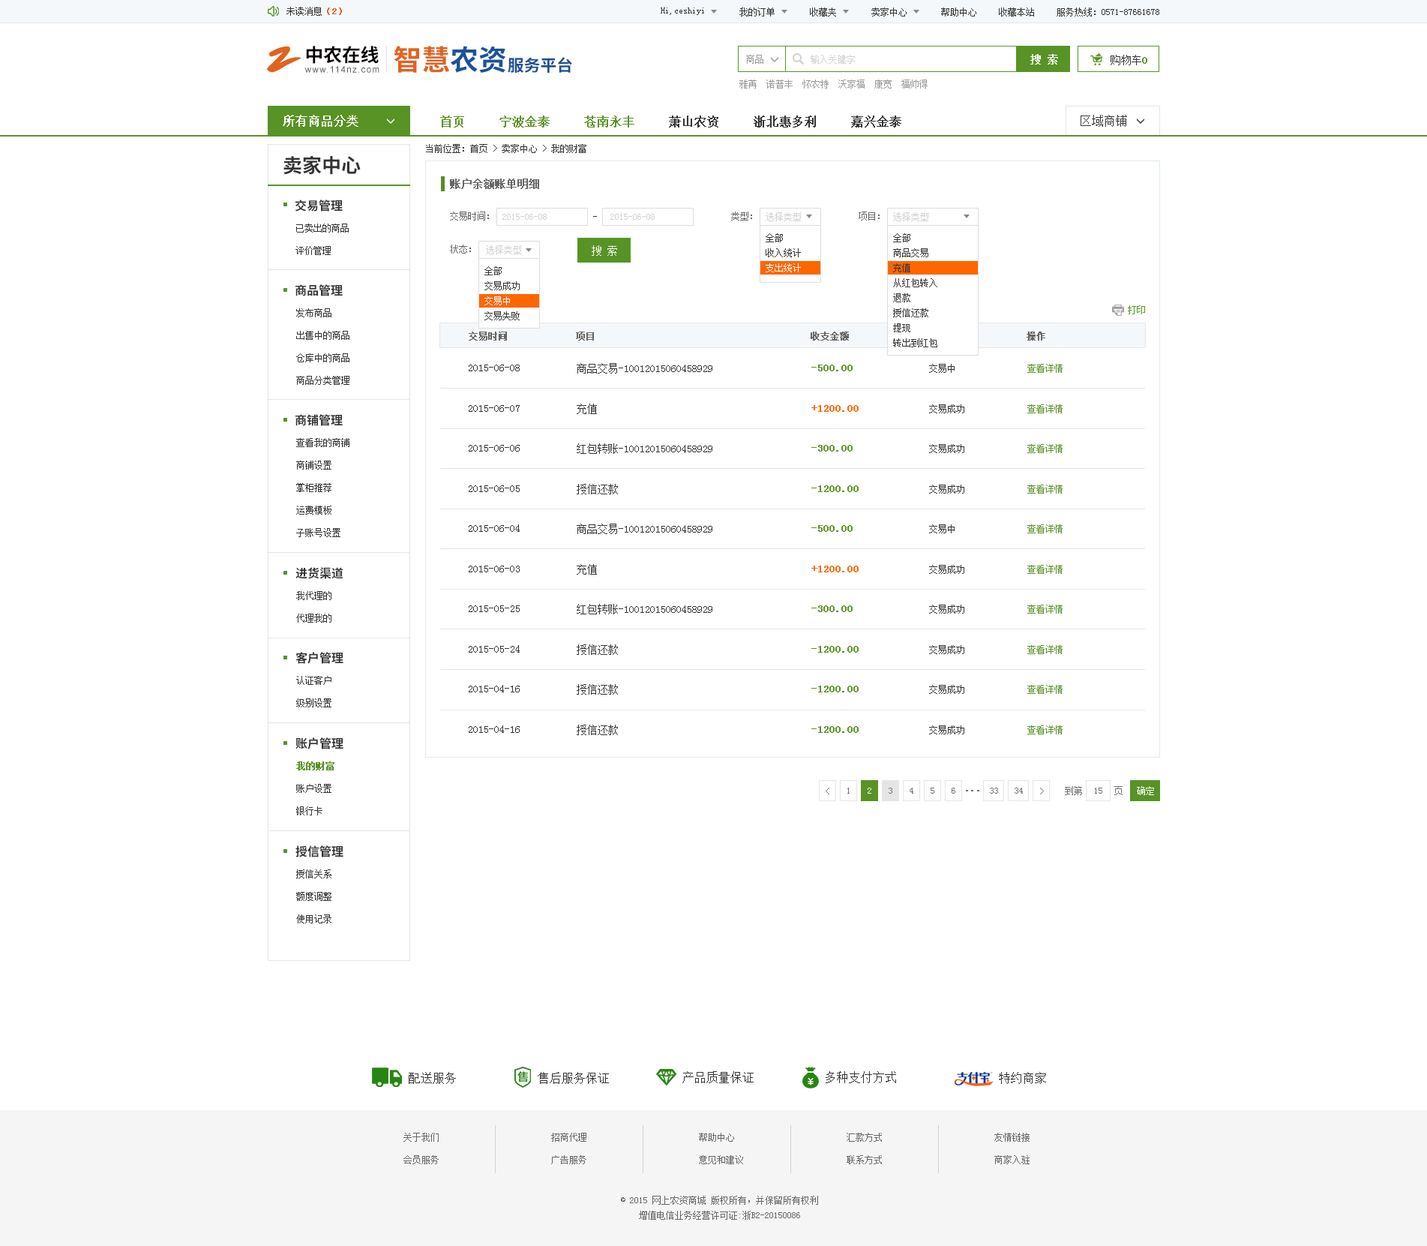
<style>
.page{position:relative;width:1427px;height:1246px;background:#ffffff}
.page>*{position:absolute;margin:0}
.t1{font:9px "SimSun";color:#333333}
.t2{font:9px "SimSun";color:#e0631f;font-weight:bold}
.t3{font:38px "SmudgerLetPlain";color:#e0631f}
.t4{font:18.6px "SourceHanSansCN-Bold";color:#060001}
.t5{font:28.4px "SourceHanSansCN-Bold";color:#e0631f}
.t6{font:28.4px "SourceHanSansCN-Bold";color:#1a529c}
.t7{font:10.5px "SimSun";color:#ffffff;font-weight:bold}
.t8{font:16.3px "SourceHanSansCN-Bold";color:#194f93}
.t9{font:9px "SimSun";color:#999999}
.t10{font:9px "SimSun";color:#d1d1d1}
.t11{font:10.5px "SimSun";color:#333333}
.t12{font:10.5px "SimSun";color:#589325;font-weight:bold}
.t13{font:8.9px "ArialMT";letter-spacing:0.1em;color:#585859}
.t14{font:12px "SimSun";color:#ffffff;font-weight:bold}
.t15{font:12px "SimSun";color:#333333;font-weight:bold}
.t16{font:12px "SimSun";color:#589325;font-weight:bold}
.t17{font:12px "SimSun";color:#333333}
.t18{font:19.5px "SourceHanSansCN-Bold";color:#333333}
.t19{font:10.5px "SimSun";color:#666666;font-weight:bold}
.t20{font:12px "SourceHanSansCN-Bold";color:#333333}
.t21{font:9px "SimSun";color:#666666}
.t22{font:9px/22.5px "SimSun";color:#333333}
.t23{font:9px/15px "SimSun";color:#333333}
.t24{font:9px/15px "SimSun";color:#ffffff}
.t25{font:10.5px "SimSun";color:#ffffff}
.t26{font:9px "SimSun";color:#589325}
.t27{font:9px "SimSun";color:#666666;font-weight:bold}
.t28{font:10.5px "SimSun";color:#ff6600;font-weight:bold}
.t29{font:9px/22.5px "SimSun";color:#589325;font-weight:bold}
.t30{font:9px "SimSun";color:#6e6e6e}
.t31{font:9px "SimSun";color:#ffffff}
.t32{font:10.5px "SimSun";letter-spacing:-0.3em;color:#6e6e6e;font-weight:bold}
.t33{font:9px/22.5px "SimSun";color:#666666}
.t34{font:9px/15px "SimSun";color:#666666}
</style>
<div class="page">
<p class="t1" style="left:286px;top:7px;width:56px;height:9px">未读消息<span class="t2">（2）</span></p>
<p class="t1" style="left:661px;top:8px;width:43px;height:7px">Hi,ceshiyi</p>
<p class="t1" style="left:740px;top:8px;width:35px;height:8px">我的订单</p>
<p class="t1" style="left:810px;top:8px;width:26px;height:8px">收藏夹</p>
<p class="t1" style="left:872px;top:8px;width:35px;height:8px">卖家中心</p>
<p class="t1" style="left:941px;top:8px;width:35px;height:8px">帮助中心</p>
<p class="t1" style="left:999px;top:8px;width:35px;height:8px">收藏本站</p>
<p class="t1" style="left:1057px;top:8px;width:103px;height:8px">服务热线：0571-87661678</p>
<p class="t3" style="left:267px;top:46px;width:35px;height:27px">Z</p>
<p class="t4" style="left:306px;top:46px;width:73px;height:18px">中农在线</p>
<p class="t5" style="left:394px;top:46px;width:112px;height:27px">智慧<span class="t6">农资</span></p>
<p class="t7" style="left:1030px;top:54px;width:28px;height:10px">搜 索</p>
<p class="t8" style="left:508px;top:57px;width:64px;height:16px">服务平台</p>
<p class="t9" style="left:746px;top:55px;width:18px;height:9px">商品</p>
<p class="t10" style="left:811px;top:55px;width:44px;height:9px">输入关键字</p>
<p class="t11" style="left:1111px;top:55px;width:37px;height:10px">购物车<span class="t12">0</span></p>
<p class="t13" style="left:304px;top:66px;width:76px;height:7px">www.114nz.com</p>
<p class="t9" style="left:740px;top:80px;width:188px;height:8px">雅苒  诺普丰  怀农特  沃家福  康宽  福帅得</p>
<p class="t14" style="left:283px;top:115px;width:75px;height:12px">所有商品分类</p>
<p class="t15" style="left:440px;top:116px;width:462px;height:12px"><span class="t16">首页     宁波金泰     苍南永丰    </span> 萧山农资     浙北惠多利     嘉兴金泰</p>
<p class="t17" style="left:1081px;top:115px;width:46px;height:12px">区域商铺</p>
<p class="t1" style="left:426px;top:144px;width:160px;height:9px">当前位置：首页 &gt; 卖家中心 &gt; 我的财富</p>
<p class="t18" style="left:284px;top:155px;width:77px;height:20px">卖家中心</p>
<p class="t19" style="left:450px;top:178px;width:89px;height:11px">账户余额账单明细</p>
<p class="t20" style="left:295px;top:200px;width:48px;height:12px">交易管理</p>
<p class="t21" style="left:450px;top:212px;width:39px;height:8px">交易时间：</p>
<p class="t10" style="left:502px;top:214px;width:45px;height:6px">2015-06-08</p>
<p class="t10" style="left:610px;top:214px;width:45px;height:6px">2015-06-08</p>
<p class="t21" style="left:731px;top:212px;width:21px;height:8px">类型：</p>
<p class="t10" style="left:766px;top:212px;width:35px;height:9px">选择类型</p>
<p class="t21" style="left:859px;top:212px;width:21px;height:8px">项目：</p>
<p class="t10" style="left:893px;top:212px;width:35px;height:9px">选择类型</p>
<p class="t22" style="left:296px;top:224px;width:53px;height:31px">已卖出的商品<br>评价管理</p>
<p class="t23" style="left:766px;top:233px;width:35px;height:39px">全部<br>收入统计<br><span class="t24">支出统计</span></p>
<p class="t23" style="left:893px;top:233px;width:45px;height:114px">全部<br>商品交易<br>充值<br>从红包转入<br>退款<br>授信还款<br>提现<br>转出到红包</p>
<p class="t21" style="left:450px;top:244px;width:21px;height:10px">状态：</p>
<p class="t10" style="left:486px;top:245px;width:35px;height:9px">选择类型</p>
<p class="t25" style="left:592px;top:245px;width:25px;height:11px">搜 索</p>
<p class="t23" style="left:484px;top:266px;width:36px;height:54px">全部<br>交易成功<br><span class="t24">交易中<br></span>交易失败</p>
<p class="t20" style="left:296px;top:284px;width:47px;height:12px">商品管理</p>
<p class="t26" style="left:1128px;top:305px;width:17px;height:9px">打印</p>
<p class="t22" style="left:296px;top:308px;width:54px;height:77px">发布商品<br>出售中的商品<br>仓库中的商品<br>商品分类管理</p>
<p class="t27" style="left:469px;top:332px;width:577px;height:8px">交易时间             项目                                         收支金额               状态               操作</p>
<p class="t11" style="left:469px;top:364px;width:51px;height:7px">2015-06-08</p>
<p class="t11" style="left:577px;top:363px;width:135px;height:11px">商品交易-10012015060458929</p>
<p class="t12" style="left:812px;top:364px;width:41px;height:7px">-500.00</p>
<p class="t1" style="left:929px;top:364px;width:26px;height:9px">交易中</p>
<p class="t26" style="left:1028px;top:364px;width:35px;height:9px">查看详情</p>
<p class="t20" style="left:296px;top:414px;width:47px;height:12px">商铺管理</p>
<p class="t11" style="left:469px;top:405px;width:51px;height:7px">2015-06-07</p>
<p class="t11" style="left:577px;top:404px;width:20px;height:10px">充值</p>
<p class="t28" style="left:812px;top:405px;width:47px;height:7px">+1200.00</p>
<p class="t1" style="left:929px;top:404px;width:35px;height:9px">交易成功</p>
<p class="t26" style="left:1028px;top:404px;width:35px;height:9px">查看详情</p>
<p class="t22" style="left:296px;top:438px;width:54px;height:99px">查看我的商铺<br>商铺设置<br>掌柜推荐<br>运费模板<br>子账号设置</p>
<p class="t11" style="left:469px;top:445px;width:51px;height:7px">2015-06-06</p>
<p class="t11" style="left:577px;top:443px;width:135px;height:11px">红包转账-10012015060458929</p>
<p class="t12" style="left:812px;top:445px;width:41px;height:7px">-300.00</p>
<p class="t1" style="left:929px;top:444px;width:35px;height:9px">交易成功</p>
<p class="t26" style="left:1028px;top:444px;width:35px;height:9px">查看详情</p>
<p class="t11" style="left:469px;top:485px;width:51px;height:7px">2015-06-05</p>
<p class="t11" style="left:577px;top:484px;width:41px;height:10px">授信还款</p>
<p class="t12" style="left:812px;top:485px;width:47px;height:7px">-1200.00</p>
<p class="t1" style="left:929px;top:484px;width:35px;height:10px">交易成功</p>
<p class="t26" style="left:1028px;top:484px;width:35px;height:10px">查看详情</p>
<p class="t11" style="left:469px;top:524px;width:51px;height:8px">2015-06-04</p>
<p class="t11" style="left:577px;top:524px;width:135px;height:10px">商品交易-10012015060458929</p>
<p class="t12" style="left:812px;top:525px;width:41px;height:7px">-500.00</p>
<p class="t1" style="left:929px;top:524px;width:26px;height:9px">交易中</p>
<p class="t26" style="left:1028px;top:524px;width:35px;height:9px">查看详情</p>
<p class="t20" style="left:296px;top:567px;width:48px;height:12px">进货渠道</p>
<p class="t11" style="left:469px;top:566px;width:51px;height:6px">2015-06-03</p>
<p class="t11" style="left:577px;top:564px;width:20px;height:10px">充值</p>
<p class="t28" style="left:812px;top:566px;width:47px;height:6px">+1200.00</p>
<p class="t1" style="left:929px;top:565px;width:35px;height:9px">交易成功</p>
<p class="t26" style="left:1028px;top:565px;width:35px;height:9px">查看详情</p>
<p class="t22" style="left:296px;top:591px;width:36px;height:31px">我代理的<br>代理我的</p>
<p class="t11" style="left:469px;top:605px;width:51px;height:7px">2015-05-25</p>
<p class="t11" style="left:577px;top:604px;width:135px;height:10px">红包转账-10012015060458929</p>
<p class="t12" style="left:812px;top:605px;width:41px;height:7px">-300.00</p>
<p class="t1" style="left:929px;top:604px;width:35px;height:10px">交易成功</p>
<p class="t26" style="left:1028px;top:604px;width:35px;height:10px">查看详情</p>
<p class="t20" style="left:296px;top:652px;width:48px;height:12px">客户管理</p>
<p class="t11" style="left:469px;top:645px;width:51px;height:7px">2015-05-24</p>
<p class="t11" style="left:577px;top:644px;width:41px;height:11px">授信还款</p>
<p class="t12" style="left:812px;top:646px;width:47px;height:6px">-1200.00</p>
<p class="t1" style="left:929px;top:645px;width:35px;height:9px">交易成功</p>
<p class="t26" style="left:1028px;top:645px;width:35px;height:9px">查看详情</p>
<p class="t22" style="left:296px;top:676px;width:36px;height:31px">认证客户<br>级别设置</p>
<p class="t11" style="left:469px;top:685px;width:51px;height:7px">2015-04-16</p>
<p class="t11" style="left:577px;top:684px;width:41px;height:10px">授信还款</p>
<p class="t12" style="left:812px;top:686px;width:47px;height:6px">-1200.00</p>
<p class="t1" style="left:929px;top:685px;width:35px;height:9px">交易成功</p>
<p class="t26" style="left:1028px;top:685px;width:35px;height:9px">查看详情</p>
<p class="t11" style="left:469px;top:725px;width:51px;height:8px">2015-04-16</p>
<p class="t11" style="left:577px;top:724px;width:41px;height:11px">授信还款</p>
<p class="t12" style="left:812px;top:726px;width:47px;height:7px">-1200.00</p>
<p class="t1" style="left:929px;top:725px;width:35px;height:9px">交易成功</p>
<p class="t26" style="left:1028px;top:725px;width:35px;height:9px">查看详情</p>
<p class="t20" style="left:296px;top:737px;width:48px;height:12px">账户管理</p>
<p class="t22" style="left:296px;top:761px;width:38px;height:54px"><span class="t29">我的财富<br></span>账户设置<br>银行卡</p>
<p class="t30" style="left:826px;top:788px;width:4px;height:6px">&lt;</p>
<p class="t30" style="left:848px;top:788px;width:2px;height:6px">1</p>
<p class="t31" style="left:868px;top:788px;width:4px;height:6px">2</p>
<p class="t30" style="left:889px;top:788px;width:3px;height:6px">3</p>
<p class="t30" style="left:910px;top:788px;width:4px;height:6px">4</p>
<p class="t30" style="left:931px;top:788px;width:3px;height:6px">5</p>
<p class="t30" style="left:952px;top:788px;width:4px;height:6px">6</p>
<p class="t32" style="left:966px;top:790px;width:14px;height:1px">. . .</p>
<p class="t30" style="left:990px;top:788px;width:8px;height:6px">33</p>
<p class="t30" style="left:1015px;top:788px;width:8px;height:6px">34</p>
<p class="t30" style="left:1040px;top:788px;width:4px;height:6px">&gt;</p>
<p class="t30" style="left:1065px;top:786px;width:58px;height:9px">到第       页</p>
<p class="t30" style="left:1095px;top:788px;width:7px;height:6px">15</p>
<p class="t31" style="left:1137px;top:786px;width:17px;height:9px">确定</p>
<p class="t20" style="left:296px;top:845px;width:48px;height:12px">授信管理</p>
<p class="t22" style="left:296px;top:869px;width:36px;height:54px">授信关系<br>额度调整<br>使用记录</p>
<p class="t17" style="left:409px;top:1072px;width:47px;height:12px">配送服务</p>
<p class="t17" style="left:538px;top:1072px;width:71px;height:12px">售后服务保证</p>
<p class="t17" style="left:682px;top:1071px;width:72px;height:12px">产品质量保证</p>
<p class="t17" style="left:826px;top:1071px;width:70px;height:12px">多种支付方式</p>
<p class="t17" style="left:999px;top:1072px;width:47px;height:12px">特约商家</p>
<p class="t33" style="left:404px;top:1132px;width:35px;height:32px">关于我们<br>会员服务</p>
<p class="t33" style="left:551px;top:1132px;width:35px;height:32px">招商代理<br>广告服务</p>
<p class="t33" style="left:699px;top:1132px;width:44px;height:32px">帮助中心<br>意见和建议</p>
<p class="t33" style="left:847px;top:1132px;width:35px;height:32px">汇款方式<br>联系方式</p>
<p class="t33" style="left:994px;top:1132px;width:36px;height:32px">友情链接<br>商家入驻</p>
<p class="t34" style="left:621px;top:1196px;width:197px;height:24px;text-align:center">© 2015 网上农资商城 版权所有，并保留所有权利<br>增值电信业务经营许可证:浙B2-20150086</p>
</div>
